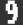
<style>
.page{position:relative;width:23px;height:25px;background:#333333}
.page>*{position:absolute;margin:0}
.t1{font:38.9px "VT323-Regular";color:#ffffff;font-weight:bold;scale:0.9 1}
</style>
<div class="page">
<p class="t1" style="left:5px;top:0px;width:13px;height:24px">9</p>
</div>
